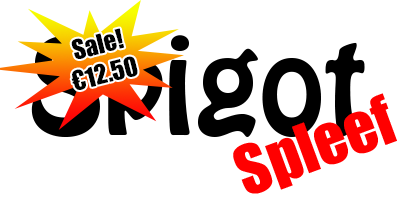
<style>
.page{position:relative;width:400px;height:200px;background:#ffffff}
.page>*{position:absolute;margin:0}
.t1{font:25px "Impact";color:#010101}
.t2{font:116.7px "HoboStd";color:#000000}
.t3{font:62.5px "Impact";color:#ff0000}
</style>
<div class="page">
<p class="t1" style="left:71px;top:28px;width:67px;height:62px;text-align:center;rotate:-14deg">Sale!<br>€12.50</p>
<p class="t2" style="left:31px;top:35px;width:334px;height:102px">Spigot</p>
<p class="t3" style="left:233px;top:93px;width:164px;height:101px;rotate:-20deg">Spleef</p>
</div>
